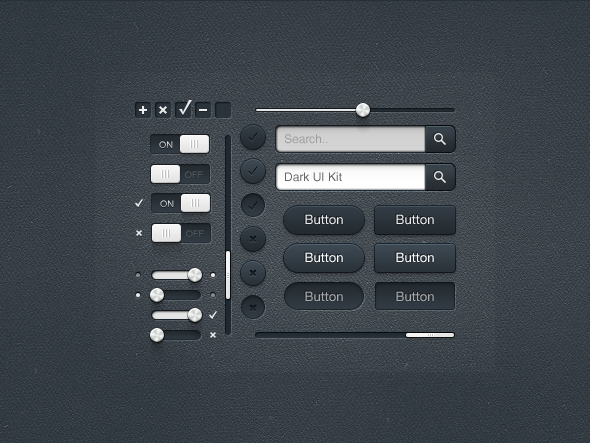
<style>
.page{position:relative;width:590px;height:443px}
.page>*{position:absolute;margin:0}
.t1{font:12px "Helvetica";color:#9b9b9b}
.t2{font:9px "Helvetica"}
.t3{font:12px "Helvetica";color:#666666}
.t4{font:13px "HelveticaNeue";color:#ececec}
.t5{font:13px "HelveticaNeue";color:#ffffff}
.t6{font:13px "HelveticaNeue";color:#a8abac}
</style>
<div class="page">
<p class="t1" style="left:284px;top:134px;width:44px;height:10px">Search..</p>
<p class="t2" style="left:159px;top:141px;width:14px;height:7px">ON</p>
<p class="t2" style="left:185px;top:171px;width:18px;height:7px">OFF</p>
<p class="t3" style="left:285px;top:172px;width:57px;height:10px">Dark UI Kit</p>
<p class="t2" style="left:160px;top:200px;width:14px;height:7px">ON</p>
<p class="t4" style="left:305px;top:214px;width:38px;height:11px">Button</p>
<p class="t4" style="left:396px;top:214px;width:38px;height:11px">Button</p>
<p class="t2" style="left:186px;top:230px;width:18px;height:7px">OFF</p>
<p class="t5" style="left:305px;top:252px;width:38px;height:11px">Button</p>
<p class="t5" style="left:396px;top:252px;width:38px;height:11px">Button</p>
<p class="t6" style="left:305px;top:291px;width:38px;height:11px">Button</p>
<p class="t6" style="left:396px;top:291px;width:38px;height:11px">Button</p>
</div>
